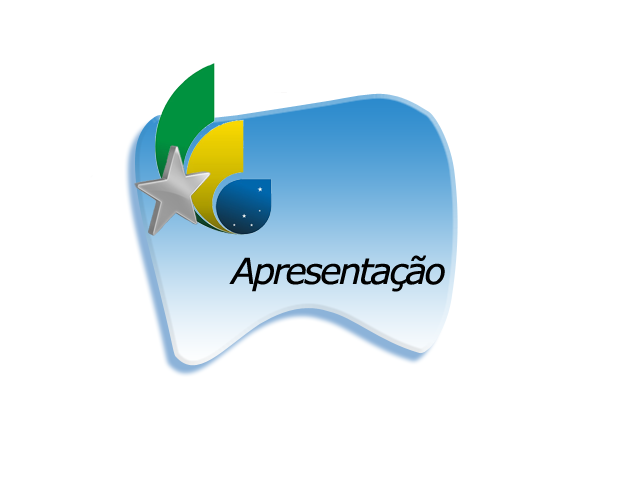
<style>
.page{position:relative;width:640px;height:480px;background:#ffffff}
.page>*{position:absolute;margin:0}
.t1{font:36px "Verdana-Italic";letter-spacing:-0.075em;color:#000000}
</style>
<div class="page">
<p class="t1" style="left:229px;top:255px;width:216px;height:37px">Apresentação</p>
</div>
